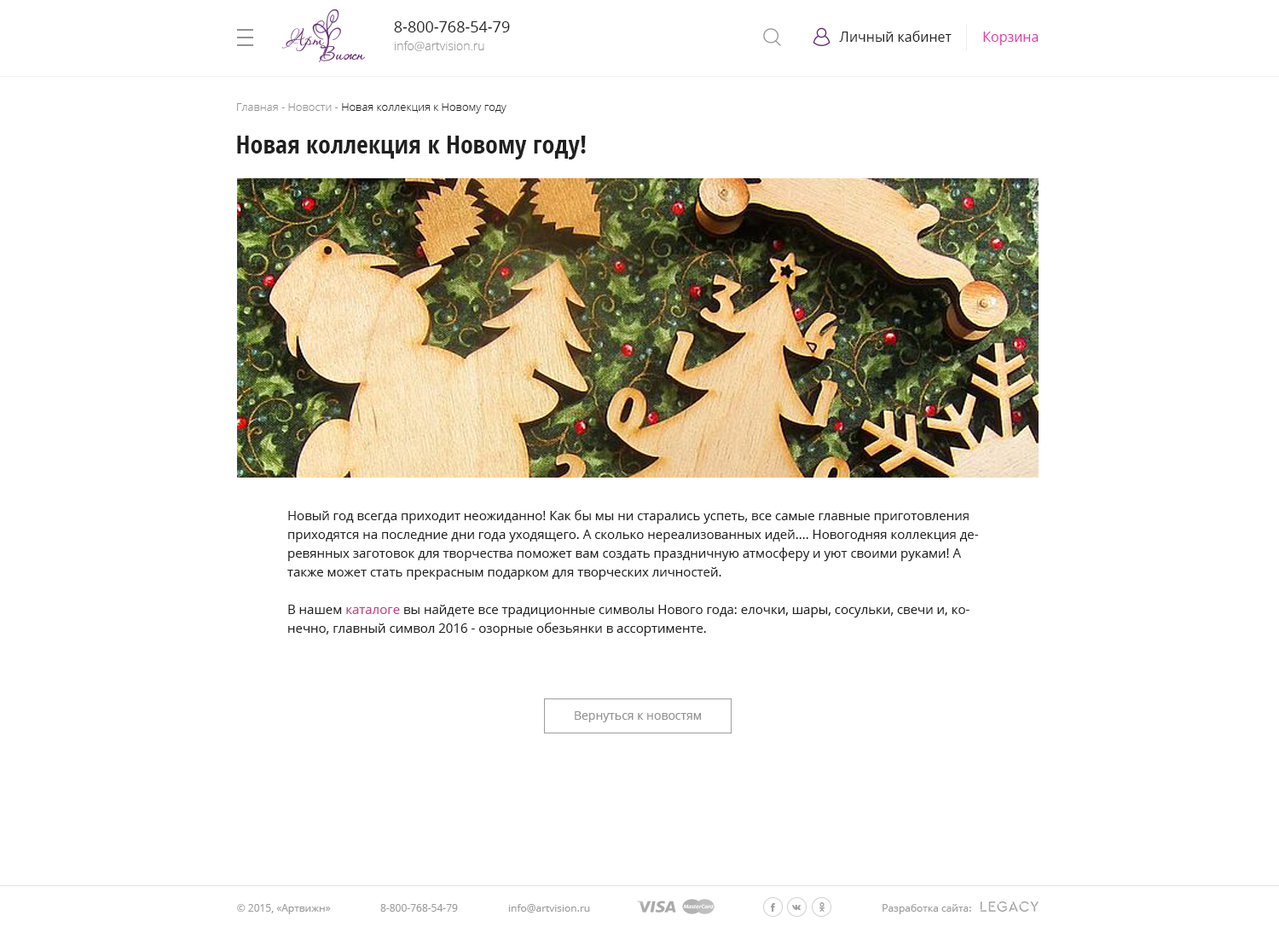
<style>
.page{position:relative;width:1279px;height:933px;background:#ffffff}
.page>*{position:absolute;margin:0}
.t1{font:15.3px "OpenSans";color:#202020}
.t2{font:11.9px "OpenSans-Light";color:#999999}
.t3{font:13.6px "OpenSans";color:#202020}
.t4{font:13.6px "OpenSans";color:#e233a6}
.t5{font:11.1px "OpenSans-Light";color:#202020}
.t6{font:11.1px "OpenSans-Light";color:#939393}
.t7{font:25.6px "OpenSans-CondensedBold";color:#202020}
.t8{font:12.8px/18.8px "OpenSans";color:#202020}
.t9{font:12.8px/25.6px "OpenSans";color:#202020}
.t10{font:12.8px/18.8px "OpenSans";color:#c63e86}
.t11{font:11.9px "OpenSans";color:#939393}
.t12{font:10.2px "OpenSans";color:#9e9d9d}
</style>
<div class="page">
<p class="t1" style="left:394px;top:21px;width:116px;height:11px">8-800-768-54-79</p>
<p class="t2" style="left:395px;top:41px;width:89px;height:10px">info@artvision.ru</p>
<p class="t3" style="left:839px;top:31px;width:112px;height:11px">Личный кабинет</p>
<p class="t4" style="left:983px;top:32px;width:55px;height:13px">Корзина</p>
<p class="t5" style="left:237px;top:103px;width:269px;height:10px"><span class="t6">Главная - Новости - </span>Новая коллекция к Новому году</p>
<p class="t7" style="left:237px;top:136px;width:349px;height:23px">Новая коллекция к Новому году!</p>
<p class="t8" style="left:287px;top:510px;width:692px;height:126px"><span class="t9">Новый год всегда приходит неожиданно! Как бы мы ни старались успеть, все самые главные приготовления </span>приходятся на последние дни года уходящего. А сколько нереализованных идей.... Новогодняя коллекция деревянных заготовок для творчества поможет вам создать праздничную атмосферу и уют своими руками! А также может стать прекрасным подарком для творческих личностей.<br><br>В нашем <span class="t10">каталоге</span> вы найдете все традиционные символы Нового года: елочки, шары, сосульки, свечи и, конечно, главный символ 2016 - озорные обезьянки в ассортименте.</p>
<p class="t11" style="left:575px;top:711px;width:126px;height:11px">Вернуться к новостям</p>
<p class="t12" style="left:237px;top:904px;width:94px;height:10px">© 2015, «Артвижн»</p>
<p class="t12" style="left:380px;top:904px;width:78px;height:7px">8-800-768-54-79</p>
<p class="t12" style="left:508px;top:904px;width:82px;height:8px">info@artvision.ru</p>
<p class="t12" style="left:882px;top:904px;width:89px;height:10px">Разработка сайта:</p>
</div>
